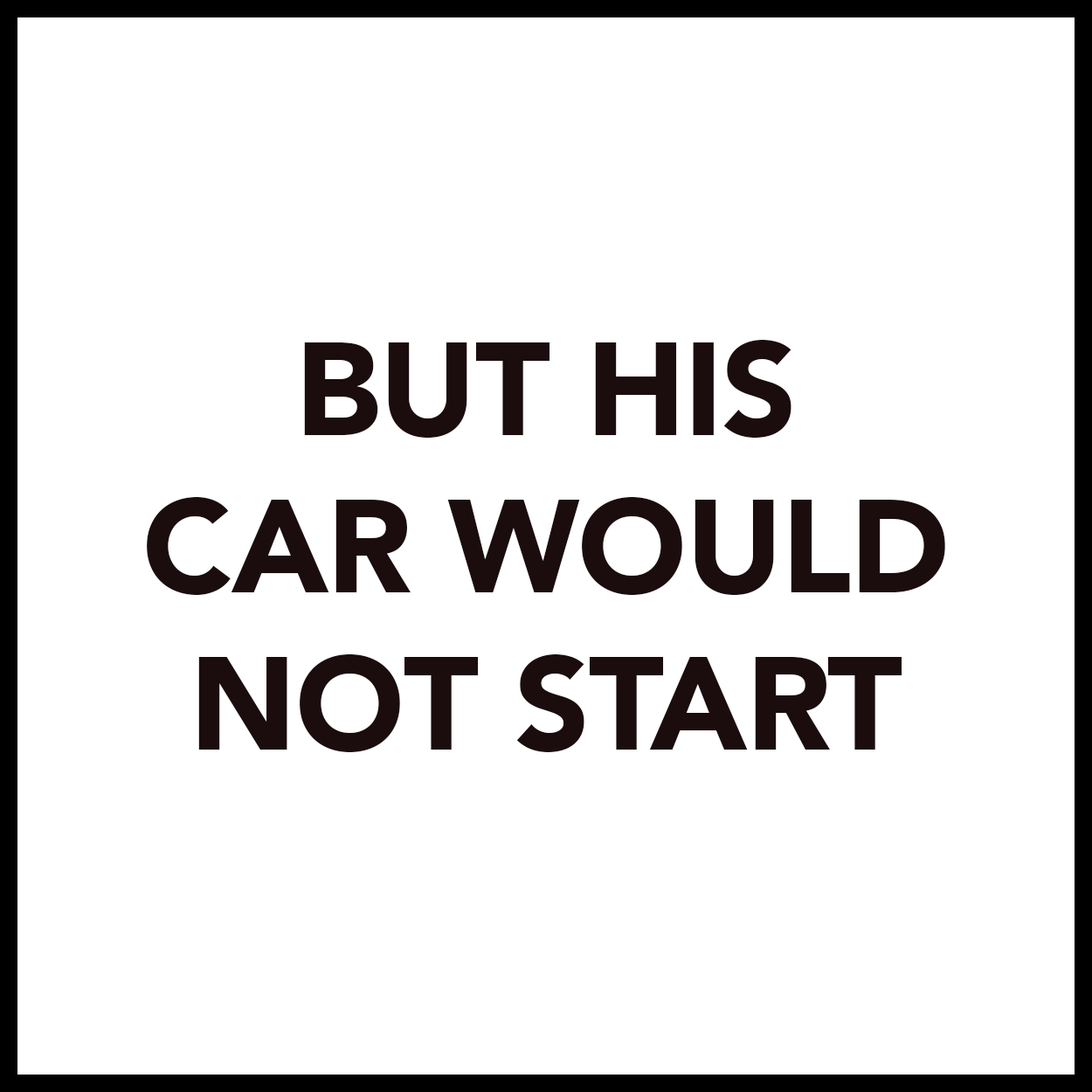
<style>
.page{position:relative;width:1092px;height:1092px;background:#ffffff}
.page>*{position:absolute;margin:0}
.t1{font:131px "Avenir-Black";letter-spacing:-0.01em;color:#1b0d0d}
</style>
<div class="page">
<p class="t1" style="left:147px;top:340px;width:798px;height:412px;text-align:center">BUT HIS<br>CAR WOULD<br>NOT START</p>
</div>
